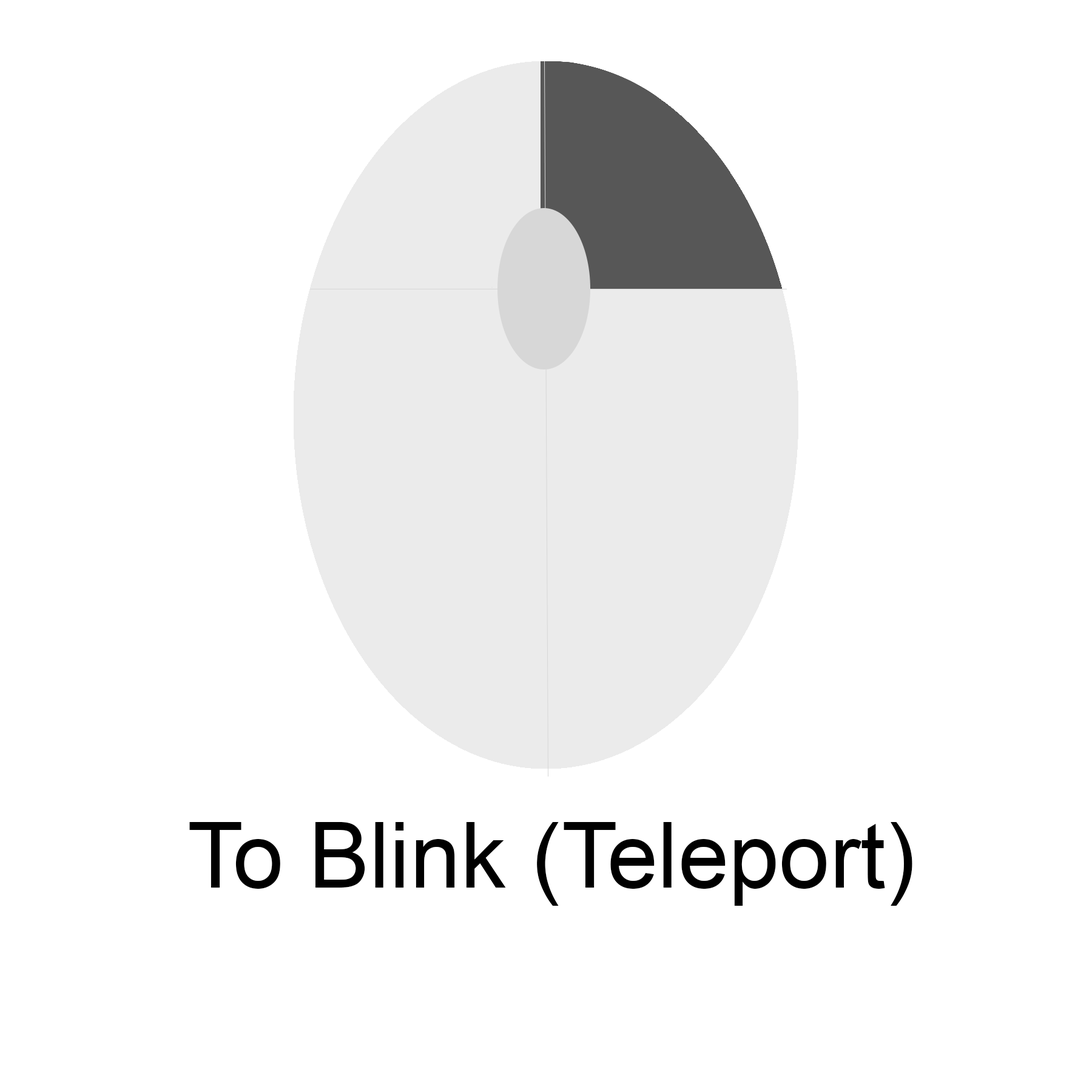
<style>
.page{position:relative;width:1092px;height:1092px;background:#ffffff}
.page>*{position:absolute;margin:0}
.t1{font:91px "ArialMT";color:#000000}
</style>
<div class="page">
<p class="t1" style="left:189px;top:822px;width:723px;height:84px">To Blink (Teleport)</p>
</div>
